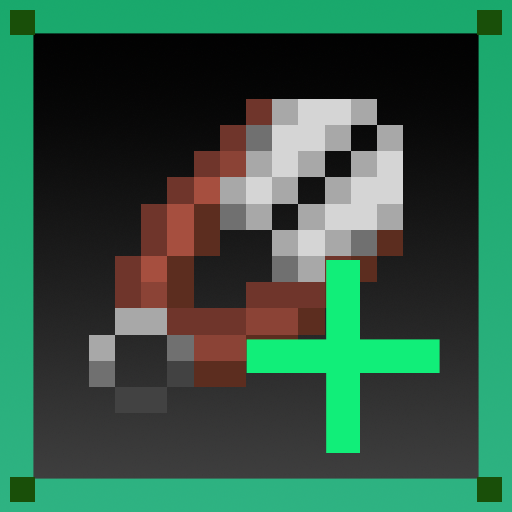
<style>
.page{position:relative;width:512px;height:512px}
.page>*{position:absolute;margin:0}
.t1{font:407.4px "ArialMT";letter-spacing:-0.02em;color:#11ee79}
</style>
<div class="page">
<p class="t1" style="left:246px;top:260px;width:194px;height:193px">+</p>
</div>
